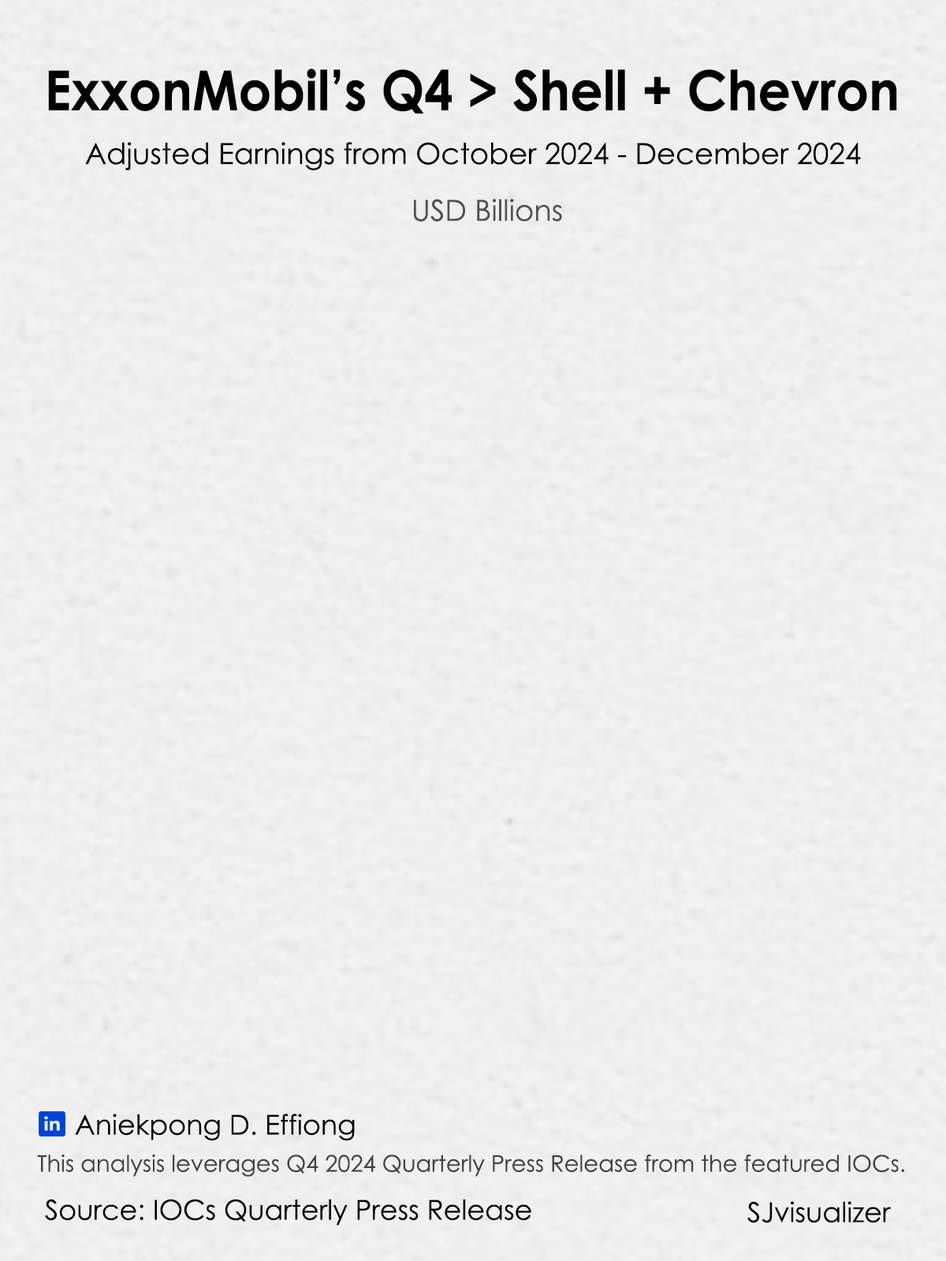
<style>
.page{position:relative;width:946px;height:1261px;background:#efefef}
.page>*{position:absolute;margin:0}
.t1{font:55.2px "CenturyGothic-Bold";color:#000000;scale:0.93 1}
.t2{font:29.2px "CenturyGothic";color:#000000}
.t3{font:29.2px "CenturyGothic";color:#525252}
.t4{font:27.6px "CenturyGothic";color:#000000}
.t5{font:22.9px "CenturyGothic";color:#424242}
</style>
<div class="page">
<p class="t1" style="left:48px;top:69px;width:849px;height:44px">ExxonMobil’s Q4 &gt; Shell + Chevron</p>
<p class="t2" style="left:85px;top:142px;width:776px;height:28px">Adjusted Earnings from October 2024 - December 2024</p>
<p class="t3" style="left:414px;top:199px;width:148px;height:22px">USD Billions</p>
<p class="t4" style="left:75px;top:1114px;width:280px;height:26px">Aniekpong D. Effiong</p>
<p class="t5" style="left:37px;top:1154px;width:867px;height:23px">This analysis leverages Q4 2024 Quarterly Press Release from the featured IOCs.</p>
<p class="t4" style="left:45px;top:1199px;width:486px;height:26px">Source: IOCs Quarterly Press Release</p>
<p class="t4" style="left:747px;top:1201px;width:144px;height:22px">SJvisualizer</p>
</div>
